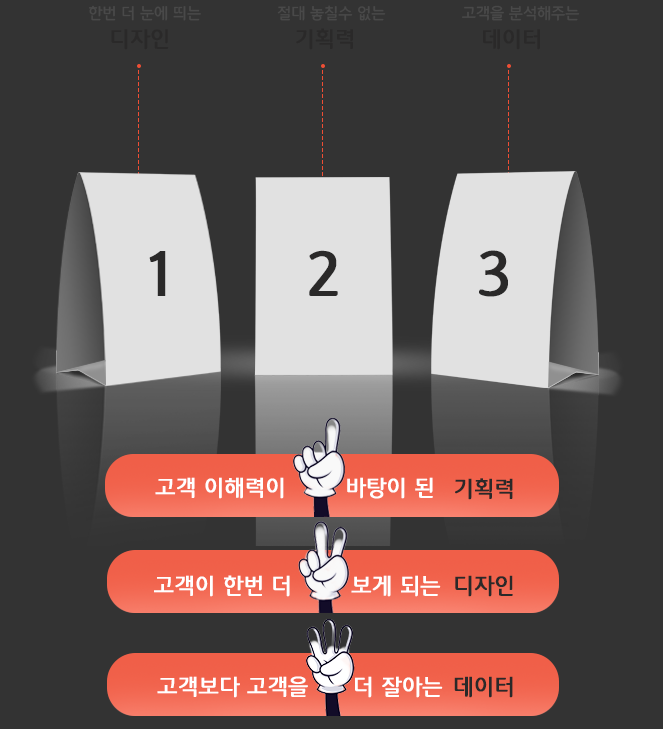
<style>
.page{position:relative;width:663px;height:729px;background:#333333}
.page>*{position:absolute;margin:0}
.t1{font:16px "12LotteMartDreamMedium";color:#505050;text-transform:uppercase}
.t2{font:22.3px "12LotteMartDreamMedium";color:#2a2929;text-transform:uppercase;font-weight:bold}
.t3{font:64.1px "12LotteMartDreamMedium";color:#2a2929;text-transform:uppercase;font-weight:bold}
.t4{font:22.7px "12LotteMartDreamMedium";color:#ffffff;text-transform:uppercase;font-weight:bold}
.t5{font:22.7px "12LotteMartDreamMedium";color:#2a2929;text-transform:uppercase;font-weight:bold}
</style>
<div class="page">
<p class="t1" style="left:89px;top:5px;width:112px;height:16px;opacity:0.77">한번 더 눈에 띄는</p>
<p class="t1" style="left:277px;top:5px;width:109px;height:16px;opacity:0.77">절대 놓칠수 없는</p>
<p class="t1" style="left:462px;top:5px;width:118px;height:16px;opacity:0.77">고객을 분석해주는</p>
<p class="t2" style="left:111px;top:29px;width:58px;height:21px">디자인</p>
<p class="t2" style="left:296px;top:28px;width:58px;height:22px">기획력</p>
<p class="t2" style="left:482px;top:29px;width:59px;height:21px">데이터</p>
<p class="t3" style="left:149px;top:251px;width:17px;height:45px">1</p>
<p class="t3" style="left:309px;top:250px;width:29px;height:46px">2</p>
<p class="t3" style="left:479px;top:250px;width:29px;height:47px">3</p>
<p class="t4" style="left:155px;top:477px;width:278px;height:22px">고객 이해력이        바탕이 된</p>
<p class="t5" style="left:455px;top:478px;width:58px;height:22px">기획력</p>
<p class="t4" style="left:154px;top:575px;width:287px;height:22px">고객이 한번 더        보게 되는</p>
<p class="t5" style="left:455px;top:575px;width:58px;height:22px">디자인</p>
<p class="t4" style="left:157px;top:676px;width:286px;height:22px">고객보다 고객을      더 잘아는</p>
<p class="t5" style="left:454px;top:676px;width:59px;height:22px">데이터</p>
</div>
